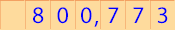
<style>
.page{position:relative;width:175px;height:30px;background:#fedb9d}
.page>*{position:absolute;margin:0}
.t1{font:24px "MyriadPro-Regular";letter-spacing:-0.025em;color:#0000ff}
</style>
<div class="page">
<p class="t1" style="left:33px;top:7px;width:11px;height:17px">8</p>
<p class="t1" style="left:57px;top:7px;width:11px;height:17px">0</p>
<p class="t1" style="left:81px;top:7px;width:11px;height:17px">0</p>
<p class="t1" style="left:108px;top:7px;width:11px;height:16px">7</p>
<p class="t1" style="left:133px;top:7px;width:11px;height:16px">7</p>
<p class="t1" style="left:157px;top:7px;width:11px;height:17px">3</p>
<p class="t1" style="left:94px;top:21px;width:5px;height:6px">,</p>
</div>
